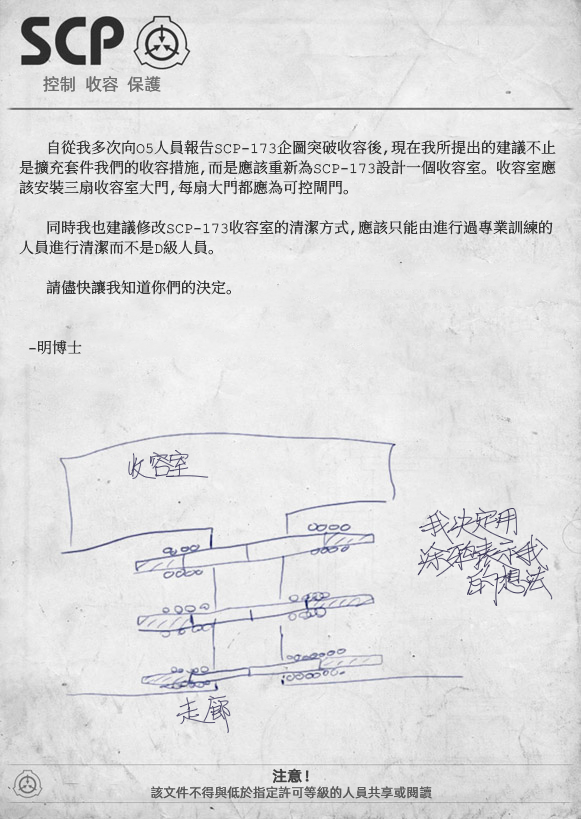
<style>
.page{position:relative;width:581px;height:819px}
.page>*{position:absolute;margin:0}
.t1{font:17px "AlibabaPuHuiTiR";color:#707070}
.t2{font:15px/20px "ContainmentBreach-Regular";color:#353535}
.t3{font:15px "AlibabaPuHuiTiR";color:#414141;font-weight:bold}
.t4{font:13px "AlibabaPuHuiTiR";color:#575757}
</style>
<div class="page">
<p class="t1" style="left:43px;top:76px;width:118px;height:16px">控制  收容  保護</p>
<p class="t2" style="left:19px;top:140px;width:537px;height:215px">自從我多次向O5人員報告SCP-173企圖突破收容後，現在我所提出的建議不止<br>是擴充套件我們的收容措施,而是應該重新為SCP-173設計一個收容室。收容室應<br>該安裝三扇收容室大門，每扇大門都應為可控閘門。<br><br>   同時我也建議修改SCP-173收容室的清潔方式，應該只能由進行過專業訓練的<br>人員進行清潔而不是D級人員。<br><br>   請儘快讓我知道你們的決定。<br><br><br> -明博士</p>
<p class="t3" style="left:272px;top:768px;width:37px;height:15px">注意！</p>
<p class="t4" style="left:151px;top:786px;width:281px;height:13px">該文件不得與低於指定許可等級的人員共享或閱讀</p>
</div>
